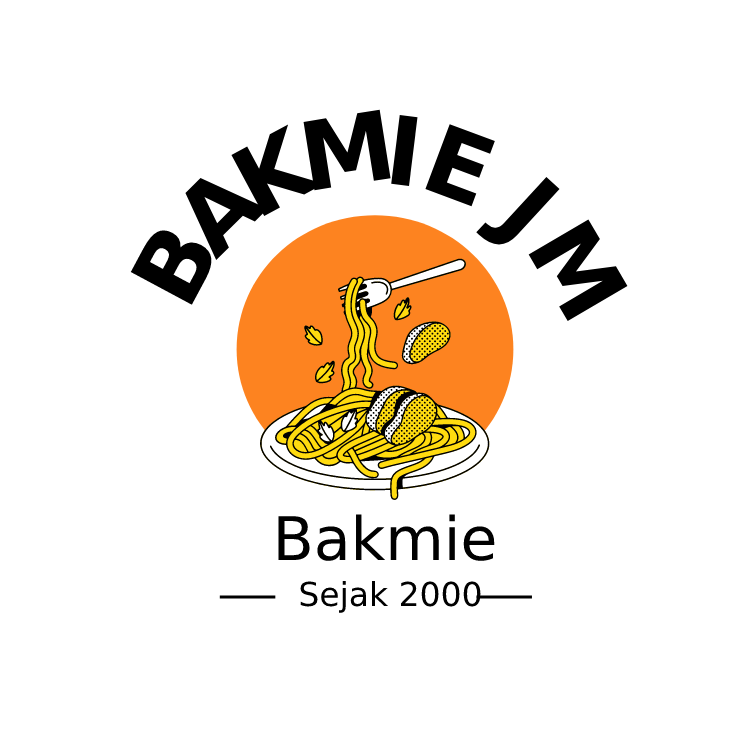
<style>
.page{position:relative;width:750px;height:750px;background:#ffffff}
.page>*{position:absolute;margin:0}
.t1{font:95px "TTRoundsCondensed-Black";color:#000000}
.t2{font:60px "OpunMai-700";color:#000000}
.t3{font:33px "Opun-Regular";color:#000000}
</style>
<div class="page">
<p class="t1" style="left:303px;top:109px;width:88px;height:82px;rotate:-9deg">M</p>
<p class="t1" style="left:231px;top:124px;width:93px;height:92px;rotate:-28deg">K</p>
<p class="t1" style="left:391px;top:115px;width:27px;height:71px;rotate:7deg">I</p>
<p class="t1" style="left:425px;top:124px;width:70px;height:83px;rotate:21deg">E</p>
<p class="t1" style="left:185px;top:177px;width:83px;height:84px;rotate:-45deg">A</p>
<p class="t1" style="left:476px;top:176px;width:84px;height:69px;rotate:43deg">J</p>
<p class="t1" style="left:528px;top:219px;width:100px;height:103px;rotate:60deg">M</p>
<p class="t1" style="left:130px;top:228px;width:83px;height:77px;rotate:-62deg">B</p>
<p class="t2" style="left:278px;top:514px;width:217px;height:47px">Bakmie</p>
<p class="t3" style="left:300px;top:580px;width:181px;height:33px">Sejak 2000</p>
</div>
